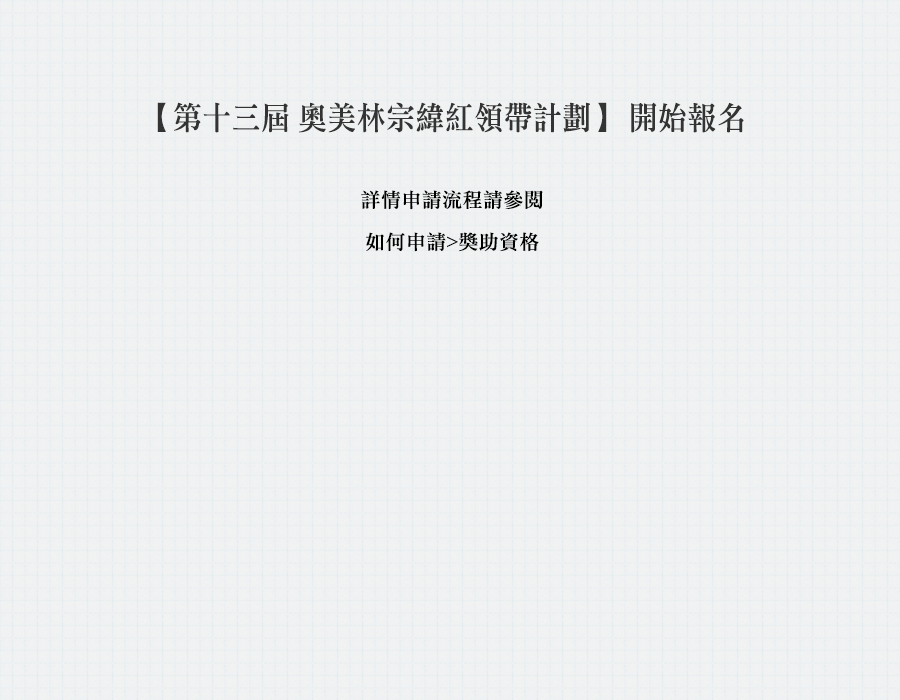
<style>
.page{position:relative;width:900px;height:700px}
.page>*{position:absolute;margin:0}
.t1{font:32px "DFLiSong-Md-HK-BF";letter-spacing:0.02em;color:#333333;scale:0.9 1}
.t2{font:20px/42px "DFLiSong-Md-HK-BF";letter-spacing:0.02em;color:#000000}
</style>
<div class="page">
<p class="t1" style="left:157px;top:102px;width:587px;height:31px">【第十三屆 奧美林宗緯紅領帶計劃】 開始報名</p>
<p class="t2" style="left:361px;top:190px;width:182px;height:62px;text-align:center">詳情申請流程請參閱<br>如何申請&gt;獎助資格</p>
</div>
